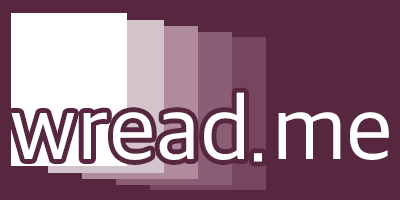
<style>
.page{position:relative;width:400px;height:200px;background:#56273f}
.page>*{position:absolute;margin:0}
.t1{font:92.7px "AppleSDGothicNeo-Regular";color:#ffffff}
</style>
<div class="page">
<p class="t1" style="left:11px;top:92px;width:378px;height:70px">wread.me</p>
</div>
